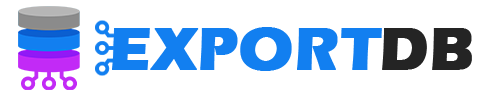
<style>
.page{position:relative;width:480px;height:96px;background:#ffffff}
.page>*{position:absolute;margin:0}
.t1{font:62.5px "ErasITC-Bold";color:#127ff0;text-transform:uppercase;font-weight:bold}
.t2{font:62.5px "ErasITC-Bold";color:#242424;text-transform:uppercase;font-weight:bold}
</style>
<div class="page">
<p class="t1" style="left:150px;top:28px;width:49px;height:42px">x</p>
<p class="t1" style="left:200px;top:27px;width:182px;height:44px">port</p>
<p class="t2" style="left:382px;top:28px;width:90px;height:42px">DB</p>
</div>
